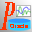
<style>
.page{position:relative;width:32px;height:32px}
.page>*{position:absolute;margin:0}
.t1{font:37.9px "BirchStd";color:#ff3300;font-style:italic}
.t2{font:6px "ArialMT";color:#ff3300}
</style>
<div class="page">
<p class="t1" style="left:0px;top:2px;width:15px;height:28px">P</p>
<p class="t2" style="left:10px;top:24px;width:18px;height:4px">Oracle</p>
</div>
